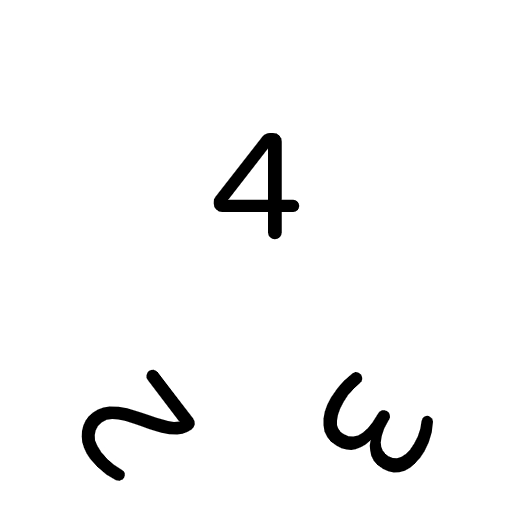
<style>
.page{position:relative;width:512px;height:512px;background:#ffffff}
.page>*{position:absolute;margin:0}
.t1{font:150px "VarelaRound-Regular";color:#000000}
</style>
<div class="page">
<p class="t1" style="left:213px;top:132px;width:87px;height:108px">4</p>
<p class="t1" style="left:80px;top:369px;width:115px;height:113px;rotate:-127deg">2</p>
<p class="t1" style="left:322px;top:371px;width:112px;height:105px;rotate:121deg">3</p>
</div>
